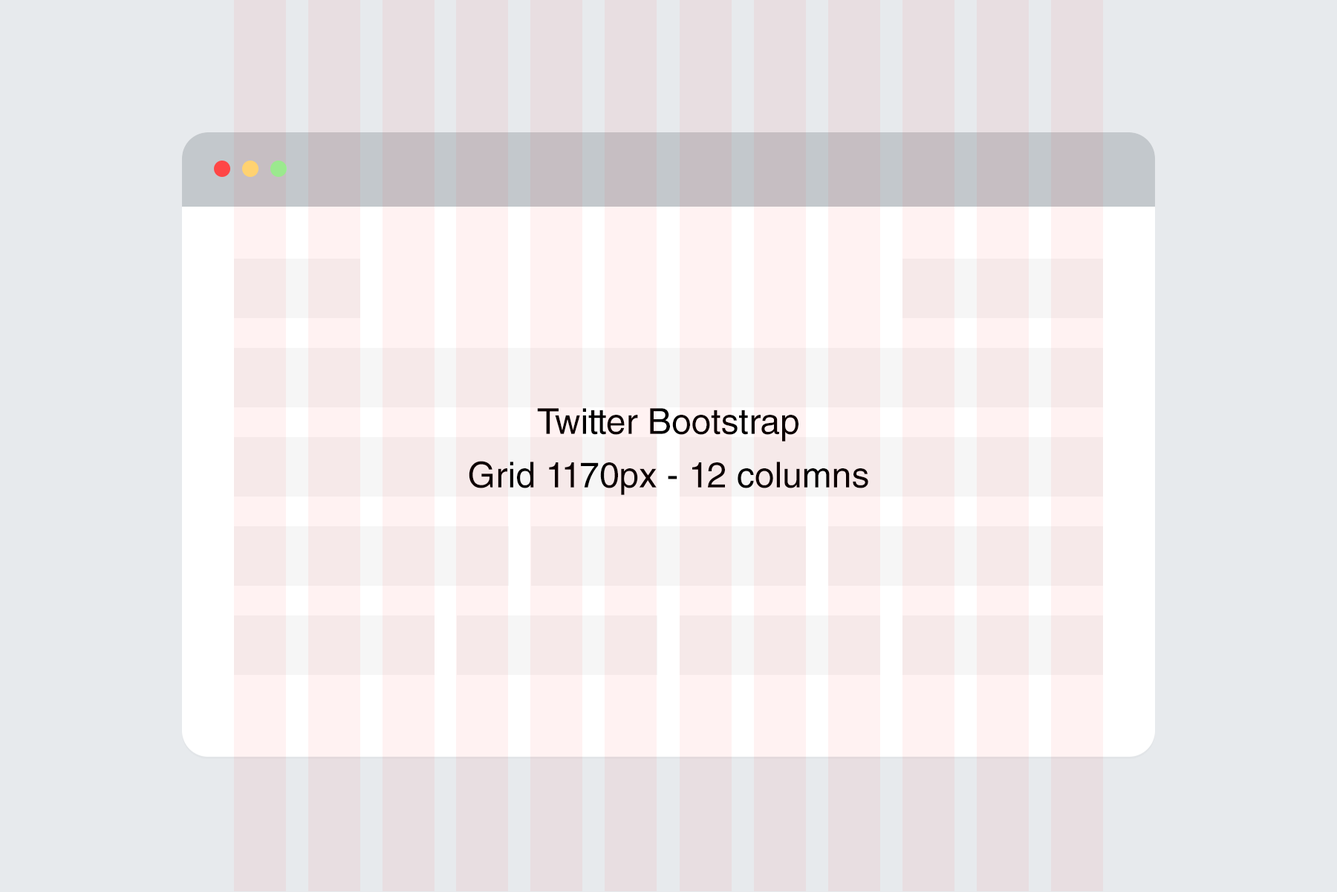
<style>
.page{position:relative;width:1337px;height:892px;background:#e7eaed}
.page>*{position:absolute;margin:0}
.t1{font:35.7px/53.5px "HelveticaLTStd-Roman";color:#000000}
.t2{font:35.7px/40.1px "HelveticaLTStd-Roman";color:#000000}
</style>
<div class="page">
<p class="t1" style="left:469px;top:408px;width:400px;height:87px;text-align:center"><span class="t2">Twitter Bootstrap<br></span>Grid 1170px - 12 columns</p>
</div>
